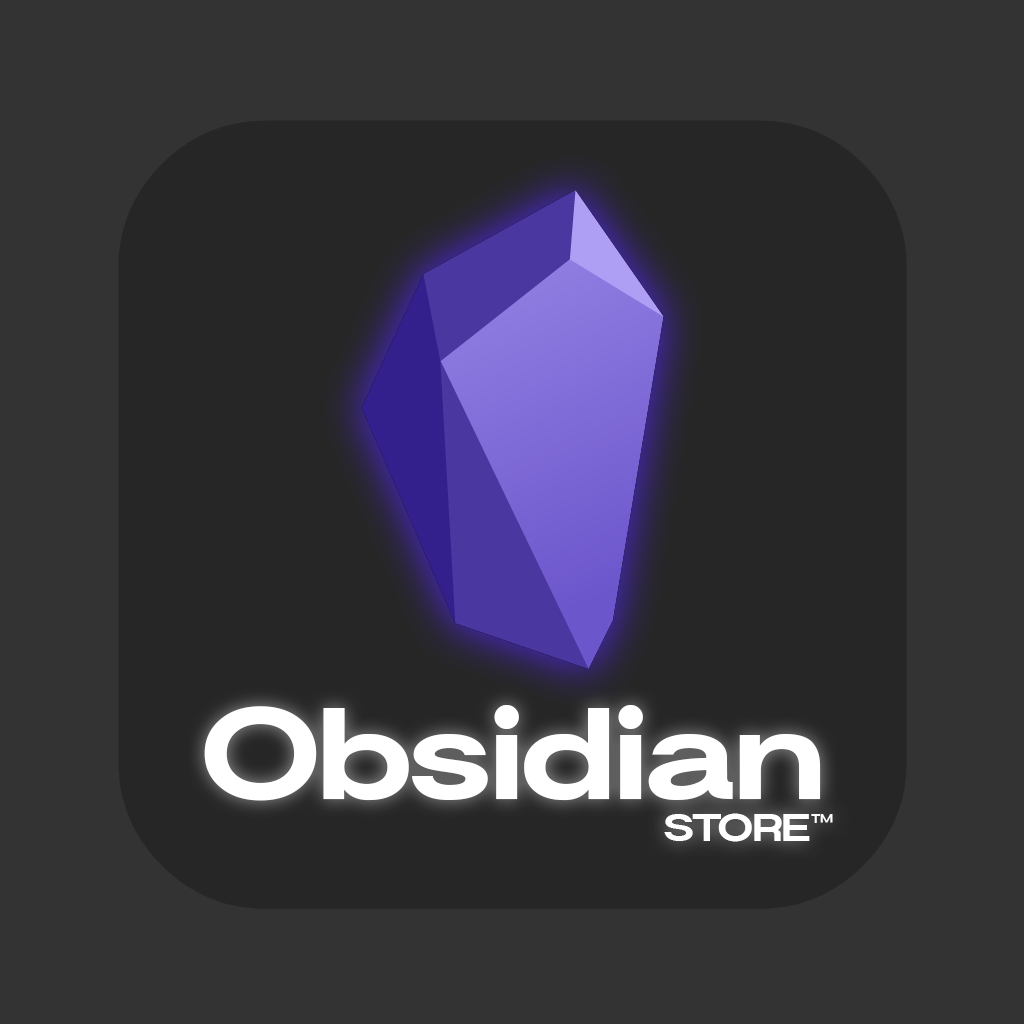
<style>
.page{position:relative;width:1024px;height:1024px;background:#333333}
.page>*{position:absolute;margin:0}
.t1{font:141.7px/41.7px "Britanica-HeavySemiExpanded";color:#ffffff}
.t2{font:66.7px/41.7px "Britanica-HeavySemiExpanded";color:#ffffff}
.t3{font:41.7px/41.7px "Britanica-HeavySemiExpanded";color:#ffffff}
</style>
<div class="page">
<p class="t1" style="left:204px;top:705px;width:629px;height:137px;text-align:center">Obsidian<span class="t2"><br>                   </span><span class="t3">         STORE™</span></p>
</div>
